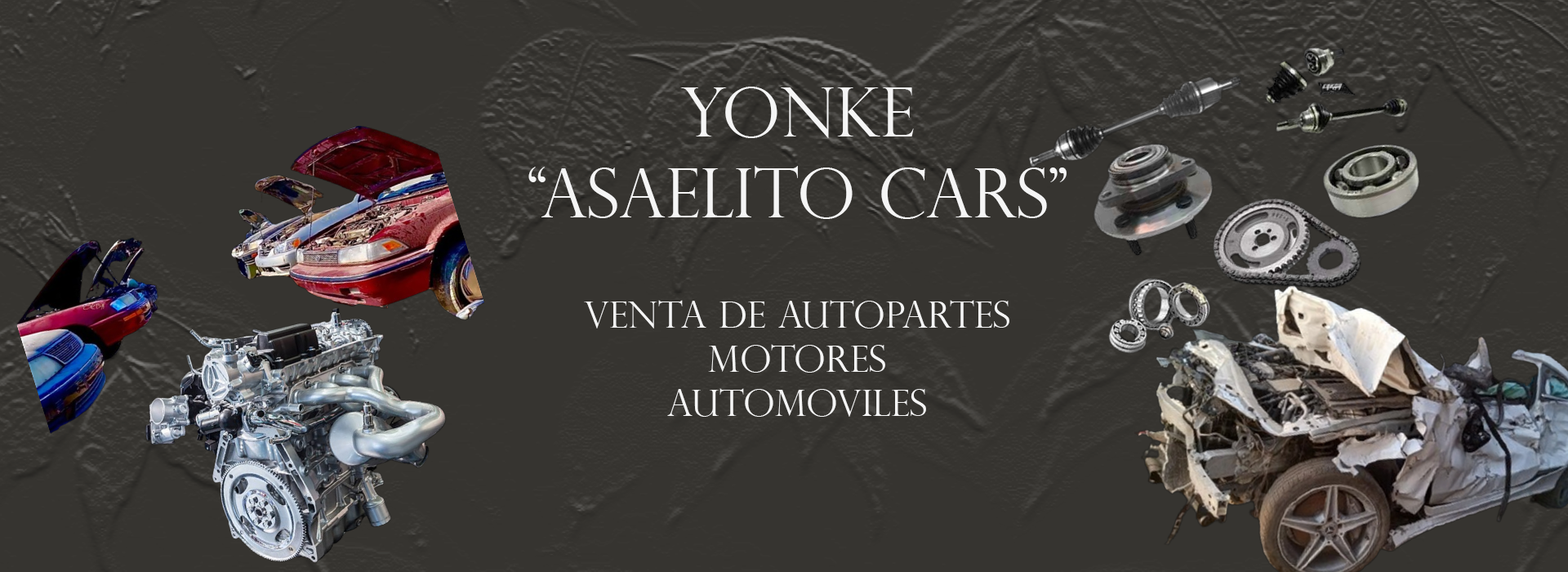
<style>
.page{position:relative;width:1568px;height:572px;background:#363430}
.page>*{position:absolute;margin:0}
.t1{font:36.7px "PerpetuaTitlingMT-Light";color:#f5f5f5}
.t2{font:67.4px "PerpetuaTitlingMT-Light";color:#f5f5f5}
</style>
<div class="page">
<p class="t1" style="left:528px;top:87px;width:539px;height:329px;text-align:center"><span class="t2">YONKE <br>“ASAELITO CARS”<br><br><br><br></span>venta de autopartes <br>motores<br>automoviles</p>
</div>
